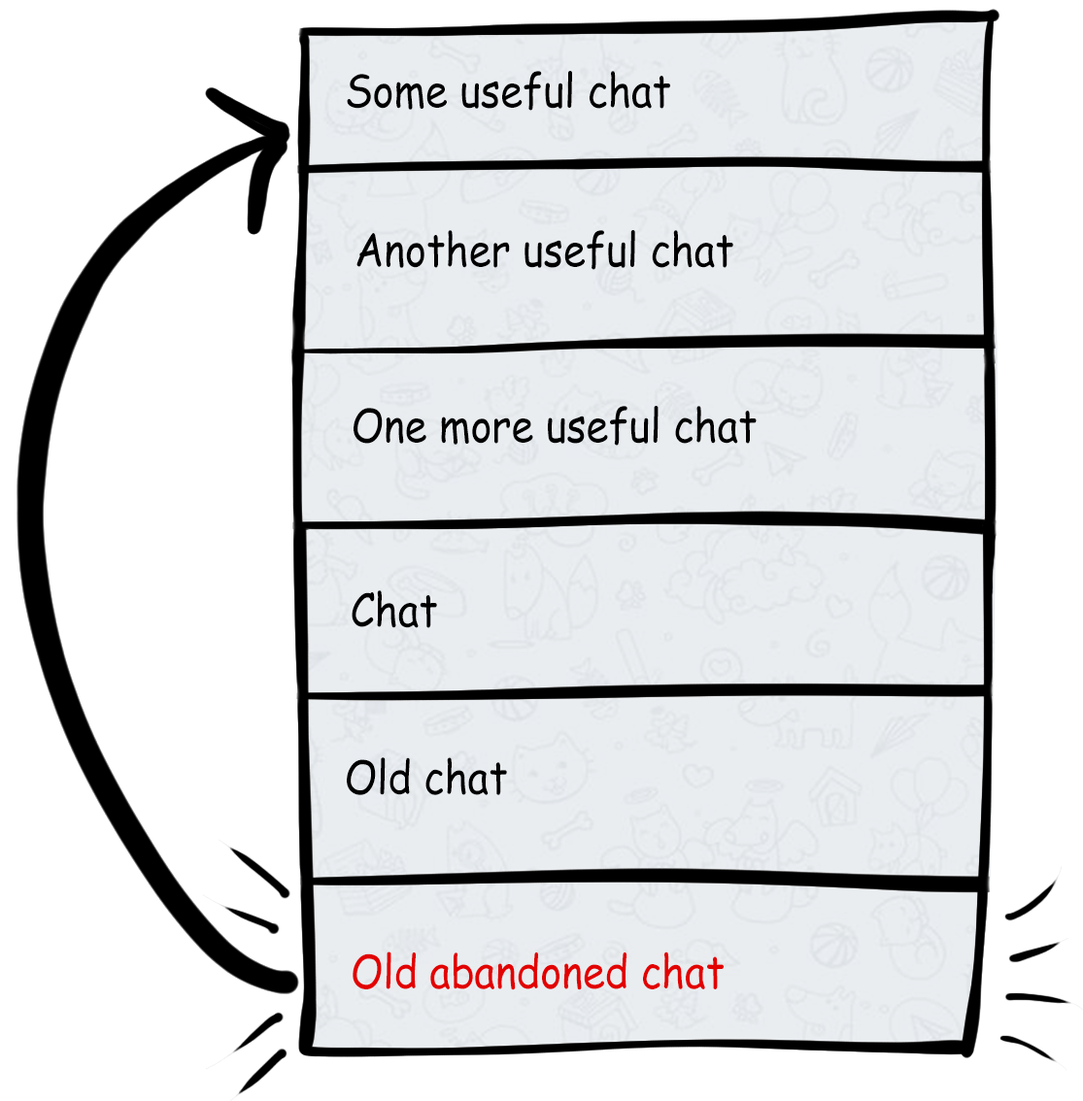
<style>
.page{position:relative;width:1083px;height:1101px;background:#ffffff}
.page>*{position:absolute;margin:0}
.t1{font:45.7px "ComicSansMS";color:#000000;scale:0.88 1}
.t2{font:45.7px "ComicSansMS";color:#e20000;scale:0.88 1}
</style>
<div class="page">
<p class="t1" style="left:347px;top:71px;width:323px;height:40px">Some useful chat</p>
<p class="t1" style="left:356px;top:230px;width:377px;height:40px">Another useful chat</p>
<p class="t1" style="left:353px;top:406px;width:404px;height:40px">One more useful chat</p>
<p class="t1" style="left:352px;top:590px;width:85px;height:38px">Chat</p>
<p class="t1" style="left:347px;top:757px;width:160px;height:38px">Old chat</p>
<p class="t2" style="left:353px;top:952px;width:370px;height:39px">Old abandoned chat</p>
</div>
